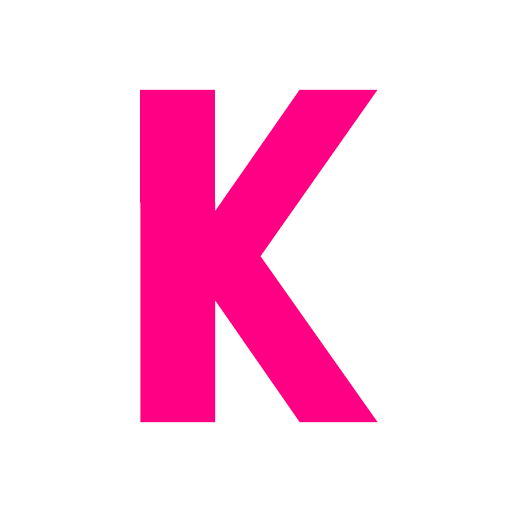
<style>
.page{position:relative;width:512px;height:512px;background:#ffffff}
.page>*{position:absolute;margin:0}
.t1{font:487.3px "SFMoviePoster-Bold";letter-spacing:-0.002em;color:#ff0084;scale:2.62 1}
</style>
<div class="page">
<p class="t1" style="left:140px;top:89px;width:238px;height:334px">K</p>
</div>
